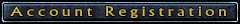
<style>
.page{position:relative;width:240px;height:24px}
.page>*{position:absolute;margin:0}
.t1{font:14px "Narkisim";letter-spacing:0.2em;color:#d2b953;scale:1.3 1}
</style>
<div class="page">
<p class="t1" style="left:10px;top:6px;width:216px;height:12px">Account Registration</p>
</div>
